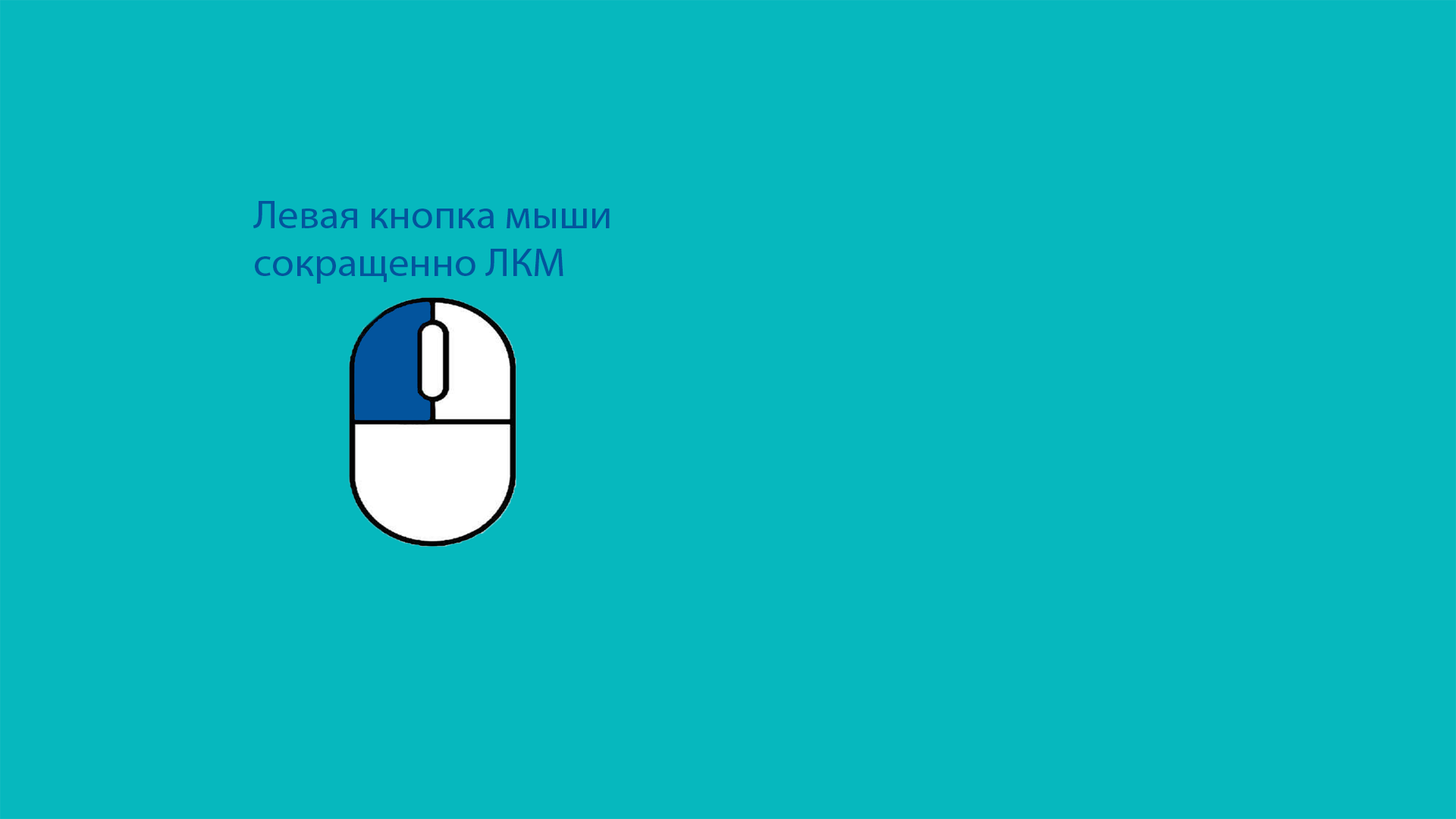
<style>
.page{position:relative;width:1456px;height:819px;background:#06b8be}
.page>*{position:absolute;margin:0}
.t1{font:39.5px "MyriadPro-Regular";color:#03549d;scale:1.05 1}
</style>
<div class="page">
<p class="t1" style="left:253px;top:201px;width:357px;height:83px">Левая кнопка мыши<br>сокращенно ЛКМ</p>
</div>
